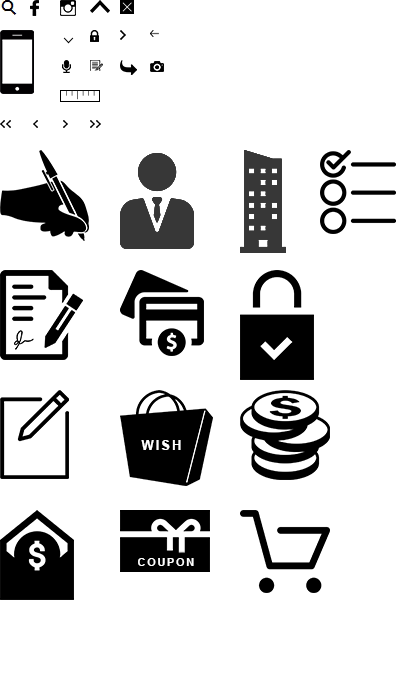
<style>
.page{position:relative;width:400px;height:700px;background:#ffffff}
.page>*{position:absolute;margin:0}
.t1{font:13.2px "Arial-BoldMT";letter-spacing:0.14em;color:#ffffff;text-transform:uppercase}
.t2{font:11.2px "Arial-BoldMT";letter-spacing:0.14em;color:#ffffff;text-transform:uppercase}
</style>
<div class="page">
<p class="t1" style="left:141px;top:440px;width:40px;height:10px">wish</p>
<p class="t2" style="left:138px;top:558px;width:56px;height:8px">coupon</p>
</div>
